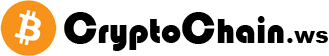
<style>
.page{position:relative;width:329px;height:56px;background:#ffffff}
.page>*{position:absolute;margin:0}
.t1{font:36px "Bauhaus93";color:#000000}
.t2{font:46px "Bauhaus93";color:#000000}
.t3{font:22.2px "Bauhaus93";color:#000000}
.t4{font:22.2px "Arial-Black";color:#000000}
</style>
<div class="page">
<p class="t1" style="left:64px;top:12px;width:264px;height:39px"><span class="t2"> C</span>rypto<span class="t2">C</span>hain<span class="t3">.</span><span class="t4">ws</span></p>
</div>
